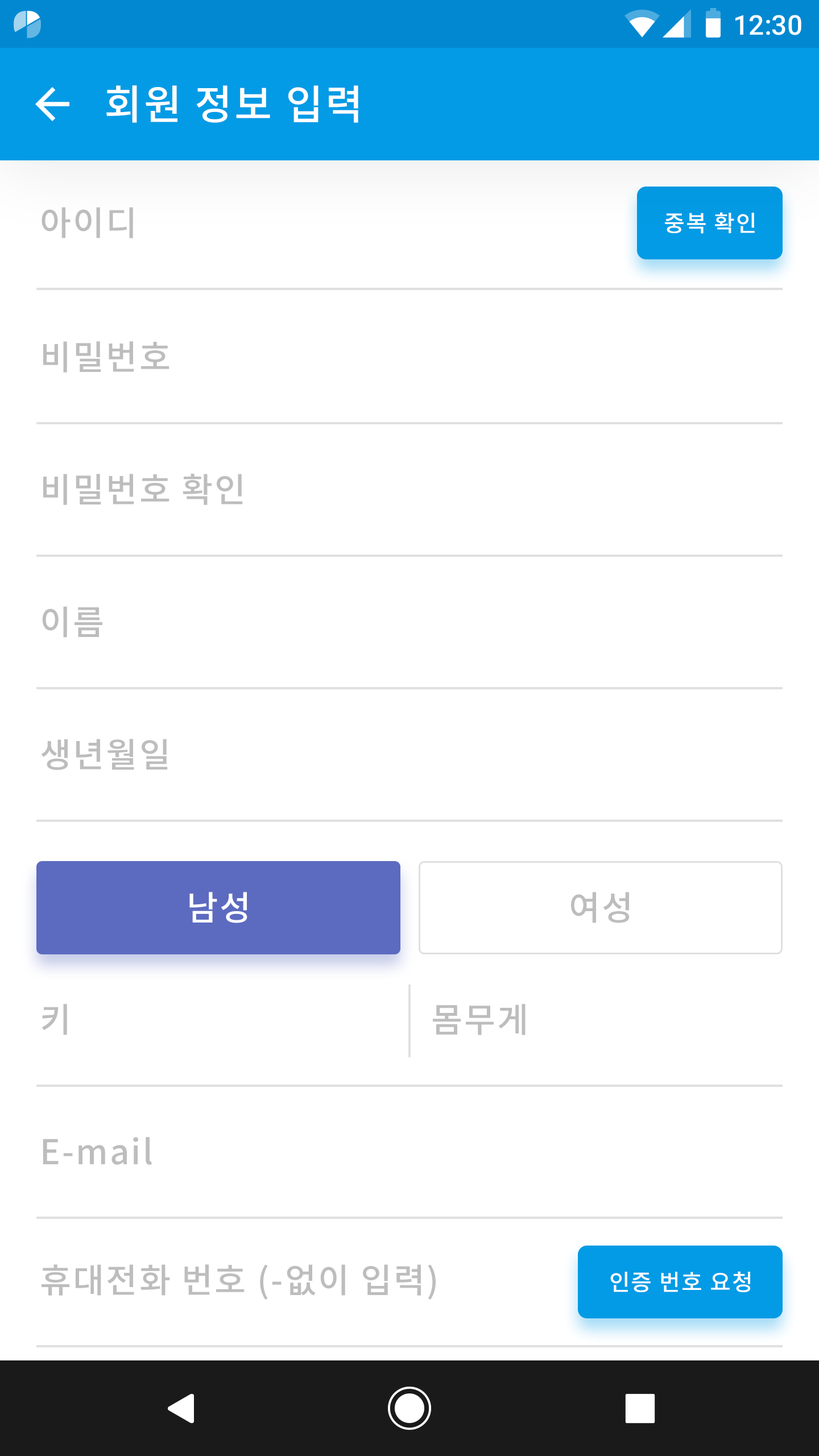
<style>
.page{position:relative;width:819px;height:1456px;background:#ffffff}
.page>*{position:absolute;margin:0}
.t1{font:27.3px "Roboto-Medium";color:#ffffff}
.t2{font:40.9px "NotoSansCJKkr-Medium";letter-spacing:0.05em;color:#ffffff}
.t3{font:34.1px "NotoSansCJKkr-Medium";letter-spacing:0.05em;color:#bdbdbd}
.t4{font:22.7px "NotoSansCJKkr-Medium";letter-spacing:0.05em;color:#ffffff}
.t5{font:34.1px "NotoSansCJKkr-Medium";letter-spacing:0.05em;color:#ffffff}
</style>
<div class="page">
<p class="t1" style="left:735px;top:15px;width:66px;height:20px">12:30</p>
<p class="t2" style="left:106px;top:85px;width:252px;height:38px">회원 정보 입력</p>
<p class="t3" style="left:42px;top:207px;width:91px;height:31px">아이디</p>
<p class="t4" style="left:665px;top:212px;width:90px;height:22px">중복 확인</p>
<p class="t3" style="left:43px;top:341px;width:126px;height:32px">비밀번호</p>
<p class="t3" style="left:43px;top:474px;width:200px;height:31px">비밀번호 확인</p>
<p class="t3" style="left:42px;top:606px;width:60px;height:32px">이름</p>
<p class="t3" style="left:41px;top:739px;width:127px;height:31px">생년월일</p>
<p class="t5" style="left:189px;top:892px;width:58px;height:31px">남성</p>
<p class="t3" style="left:571px;top:892px;width:59px;height:31px">여성</p>
<p class="t3" style="left:42px;top:1004px;width:25px;height:31px">키</p>
<p class="t3" style="left:433px;top:1004px;width:93px;height:31px">몸무게</p>
<p class="t3" style="left:43px;top:1137px;width:109px;height:28px">E-mail</p>
<p class="t3" style="left:42px;top:1264px;width:394px;height:36px">휴대전화 번호 (-없이 입력)</p>
<p class="t4" style="left:610px;top:1271px;width:140px;height:21px">인증 번호 요청</p>
</div>
